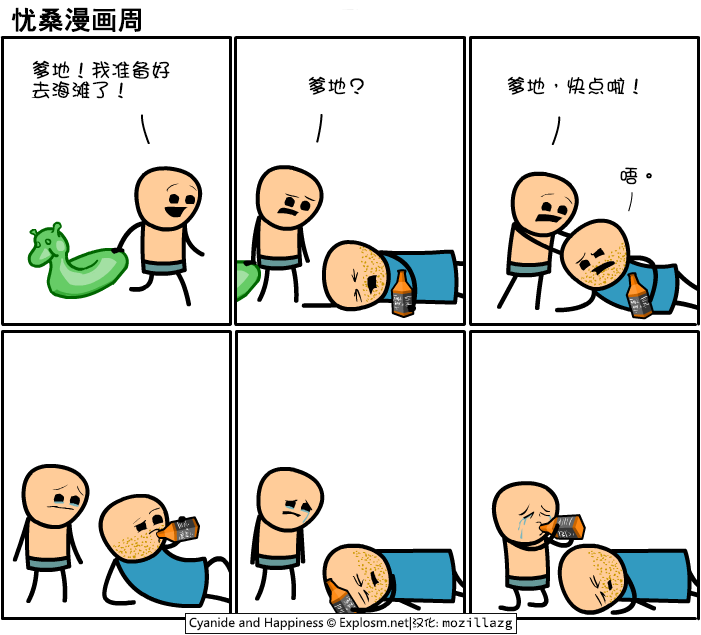
<style>
.page{position:relative;width:701px;height:635px;background:#ffffff}
.page>*{position:absolute;margin:0}
.t1{font:26px "SimHei";color:#000000;font-weight:bold}
.t2{font:20px/20px "DFGirl";color:#000000}
.t3{font:20px "DFGirl";color:#000000}
</style>
<div class="page">
<p class="t1" style="left:11px;top:7px;width:130px;height:25px">忧桑漫画周</p>
<p class="t2" style="left:32px;top:60px;width:138px;height:39px">爹地！我准备好<br>去海滩了！</p>
<p class="t3" style="left:308px;top:76px;width:56px;height:19px">爹地？</p>
<p class="t3" style="left:507px;top:76px;width:131px;height:19px">爹地，快点啦！</p>
<p class="t3" style="left:620px;top:167px;width:32px;height:18px">唔。</p>
</div>
